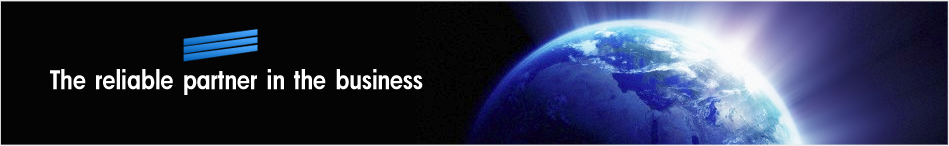
<style>
.page{position:relative;width:949px;height:146px;background:#040404}
.page>*{position:absolute;margin:0}
.t1{font:26px "AAvanteBsNrBold";color:#ffffff}
</style>
<div class="page">
<p class="t1" style="left:50px;top:69px;width:373px;height:26px">The reliable partner in the business</p>
</div>
